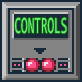
<style>
.page{position:relative;width:82px;height:82px;background:#182939}
.page>*{position:absolute;margin:0}
.t1{font:23.4px/31.2px "Consolas";color:#67f871;scale:0.51 1}
</style>
<div class="page">
<p class="t1" style="left:15px;top:17px;width:52px;height:17px;text-align:center">CONTROLS<br><br><br><br>  ssdaasd</p>
</div>
